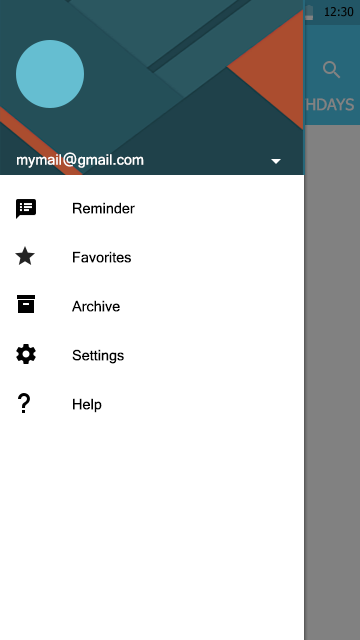
<style>
.page{position:relative;width:360px;height:640px;background:#ffffff}
.page>*{position:absolute;margin:0}
.t1{font:16px "Tahoma"}
.t2{font:16px "Raavi";color:#ffffff}
.t3{font:16px "Raavi";color:#000000}
</style>
<div class="page">
<p class="t1" style="left:272px;top:98px;width:82px;height:13px">BIRTHDAYS</p>
<p class="t2" style="left:17px;top:152px;width:127px;height:16px">mymail@gmail.com</p>
<p class="t3" style="left:73px;top:202px;width:62px;height:12px">Reminder</p>
<p class="t3" style="left:73px;top:251px;width:58px;height:12px">Favorites</p>
<p class="t3" style="left:72px;top:300px;width:48px;height:12px">Archive</p>
<p class="t3" style="left:72px;top:349px;width:52px;height:15px">Settings</p>
<p class="t3" style="left:73px;top:398px;width:29px;height:15px">Help</p>
</div>
